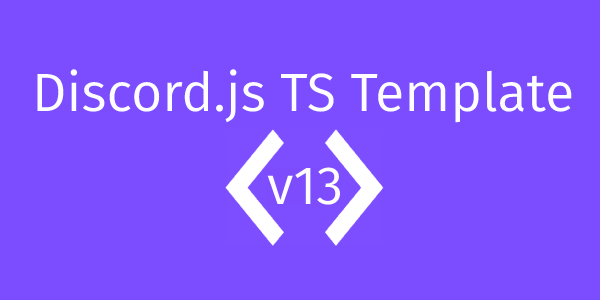
<style>
.page{position:relative;width:600px;height:300px;background:#7c4dff}
.page>*{position:absolute;margin:0}
.t1{font:53.8px "FiraSans-Book";color:#ffffff}
</style>
<div class="page">
<p class="t1" style="left:37px;top:69px;width:535px;height:54px">Discord.js TS Template</p>
<p class="t1" style="left:267px;top:167px;width:73px;height:38px">v13</p>
</div>
